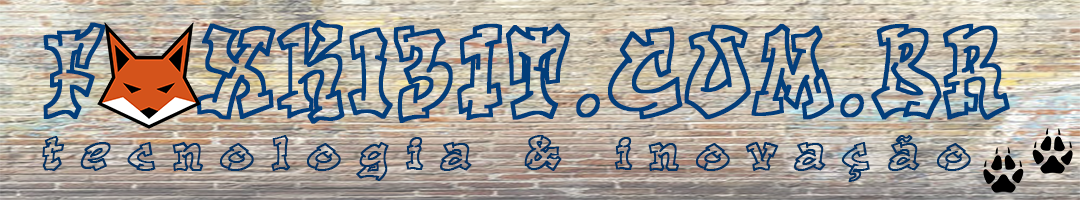
<style>
.page{position:relative;width:1080px;height:200px}
.page>*{position:absolute;margin:0}
.t1{font:127.8px "Aerosol";color:#023e7a;font-weight:bold;scale:0.75 1}
.t2{font:85.2px "Aerosol";color:#023e7a;scale:0.75 1}
.t3{font:50px "Aerosol";letter-spacing:0.33em;color:#033261;font-weight:bold}
</style>
<div class="page">
<p class="t1" style="left:43px;top:20px;width:967px;height:104px"><span class="t2"><br></span>F   XK13IT.COM.BR</p>
<p class="t3" style="left:42px;top:135px;width:929px;height:47px">tecnologia &amp; inovação</p>
</div>
